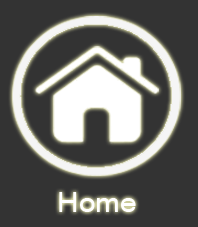
<style>
.page{position:relative;width:198px;height:227px;background:#333333}
.page>*{position:absolute;margin:0}
.t1{font:31.2px "Raavi";color:#ffffff;scale:1.05 1}
</style>
<div class="page">
<p class="t1" style="left:59px;top:192px;width:77px;height:20px">Home</p>
</div>
